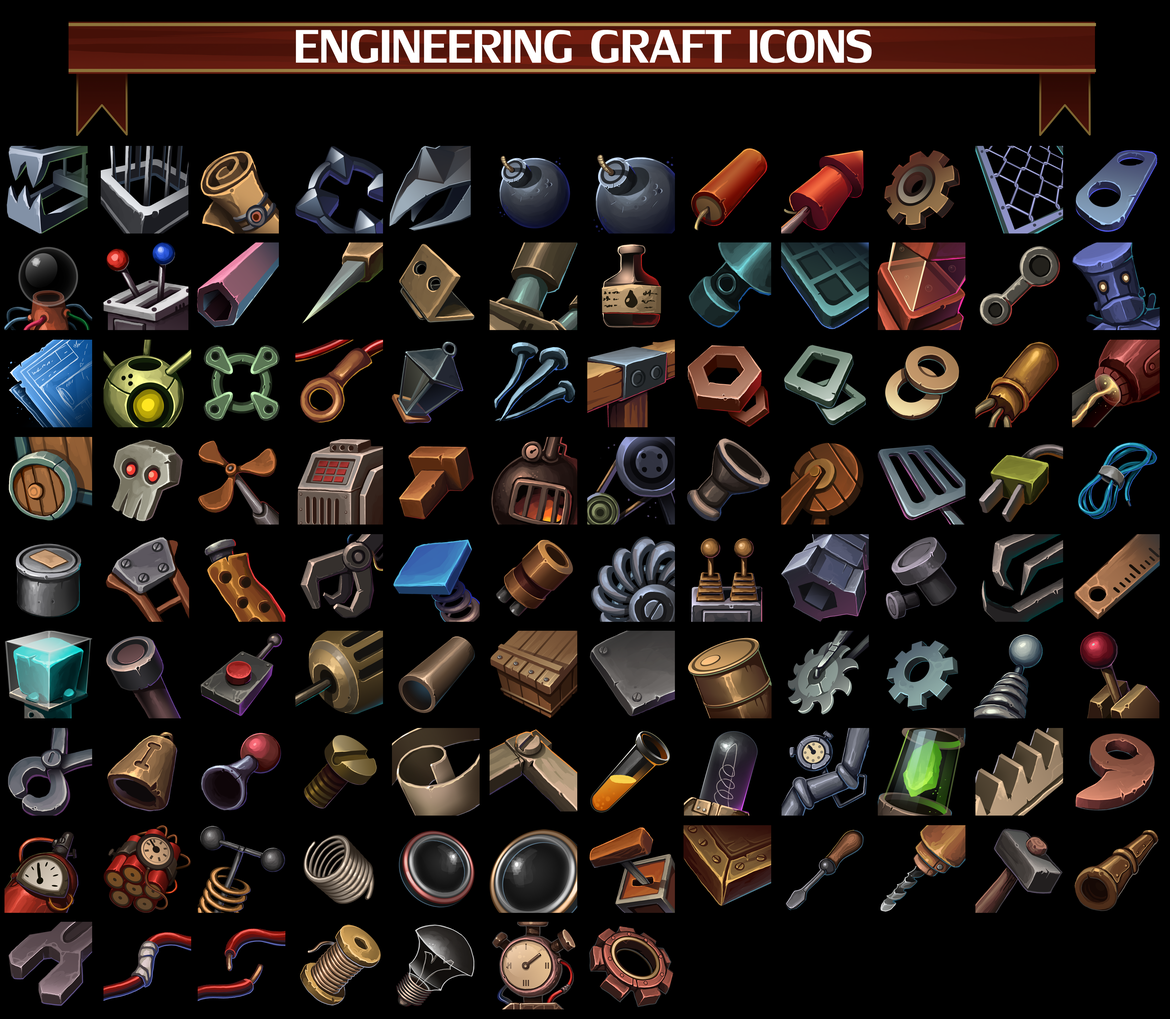
<style>
.page{position:relative;width:1170px;height:1019px;background:#000000}
.page>*{position:absolute;margin:0}
.t1{font:70.2px "LilyUPC";color:#ffffff}
</style>
<div class="page">
<p class="t1" style="left:296px;top:29px;width:575px;height:34px">ENGINEERING GRAFT ICONS</p>
</div>
